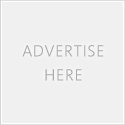
<style>
.page{position:relative;width:125px;height:125px;background:#f0f0f0}
.page>*{position:absolute;margin:0}
.t1{font:16px/24px "Segan-Light";letter-spacing:0.05em;color:#aaaaaa}
</style>
<div class="page">
<p class="t1" style="left:22px;top:45px;width:82px;height:36px;text-align:center">ADVERTISE<br>HERE</p>
</div>
